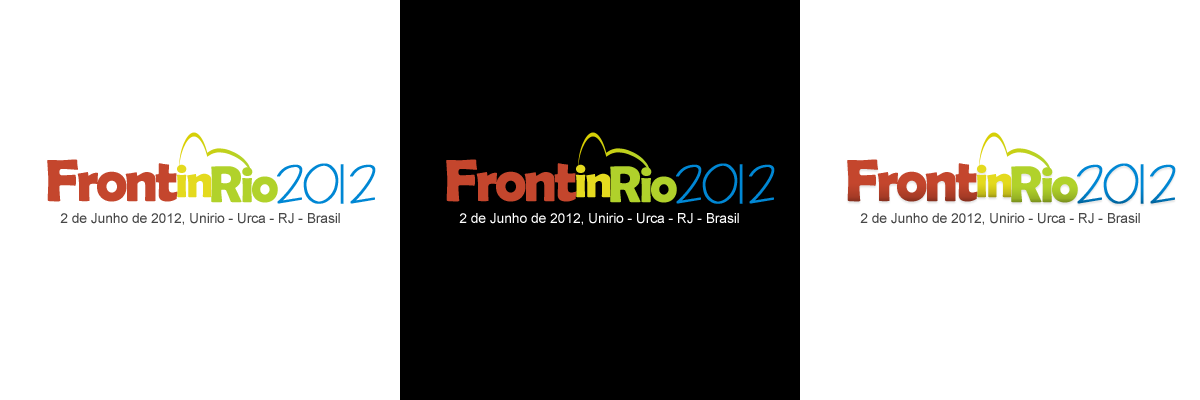
<style>
.page{position:relative;width:1200px;height:400px;background:#ffffff}
.page>*{position:absolute;margin:0}
.t1{font:60px "BerlinSansFBDemi-Bold";letter-spacing:-0.05em;color:#c4462d}
.t2{font:48px "BerlinSansFBDemi-Bold";letter-spacing:-0.05em;color:#e4da1f}
.t3{font:52px "BerlinSansFBDemi-Bold";letter-spacing:-0.05em;color:#b0d12b}
.t4{font:48px "CityBlueprint";letter-spacing:-0.05em;color:#0087d4;font-weight:bold}
.t5{font:14px "ArialMT";letter-spacing:-0.01em;color:#474747}
.t6{font:14px "ArialMT";letter-spacing:-0.01em;color:#ffffff}
</style>
<div class="page">
<p class="t1" style="left:47px;top:159px;width:131px;height:43px">Front</p>
<p class="t1" style="left:446px;top:159px;width:131px;height:43px">Front</p>
<p class="t1" style="left:847px;top:159px;width:131px;height:43px">Front</p>
<p class="t2" style="left:177px;top:164px;width:35px;height:34px">in</p>
<p class="t3" style="left:211px;top:166px;width:67px;height:37px">Rio</p>
<p class="t4" style="left:277px;top:163px;width:99px;height:41px">2012</p>
<p class="t2" style="left:576px;top:164px;width:35px;height:34px">in</p>
<p class="t3" style="left:610px;top:166px;width:67px;height:37px">Rio</p>
<p class="t4" style="left:676px;top:163px;width:99px;height:41px">2012</p>
<p class="t2" style="left:977px;top:164px;width:35px;height:34px">in</p>
<p class="t3" style="left:1011px;top:166px;width:67px;height:37px">Rio</p>
<p class="t4" style="left:1077px;top:163px;width:99px;height:41px">2012</p>
<p class="t5" style="left:60px;top:213px;width:280px;height:12px">2 de Junho de 2012, Unirio - Urca - RJ - Brasil</p>
<p class="t6" style="left:459px;top:213px;width:280px;height:12px">2 de Junho de 2012, Unirio - Urca - RJ - Brasil</p>
<p class="t5" style="left:860px;top:213px;width:280px;height:12px">2 de Junho de 2012, Unirio - Urca - RJ - Brasil</p>
</div>
